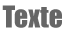
<style>
.page{position:relative;width:64px;height:32px;background:#ffffff}
.page>*{position:absolute;margin:0}
.t1{font:27.7px "Impact";color:#666666}
</style>
<div class="page">
<p class="t1" style="left:2px;top:5px;width:60px;height:23px">Texte</p>
</div>
